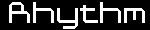
<style>
.page{position:relative;width:150px;height:30px;background:#000000}
.page>*{position:absolute;margin:0}
.t1{font:47.4px "Ace-Futurism";color:#ffffff}
</style>
<div class="page">
<p class="t1" style="left:9px;top:2px;width:136px;height:27px">Rhythm</p>
</div>
